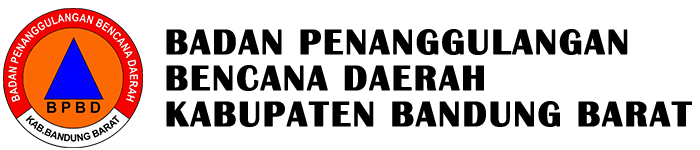
<style>
.page{position:relative;width:700px;height:150px;background:#ffffff}
.page>*{position:absolute;margin:0}
.t1{font:36px/36px "BritannicBold";letter-spacing:0.05em;color:#000000;font-weight:bold}
</style>
<div class="page">
<p class="t1" style="left:166px;top:29px;width:526px;height:98px">BADAN PENANGGULANGAN<br>BENCANA DAERAH<br>KABUPATEN BANDUNG BARAT</p>
</div>
